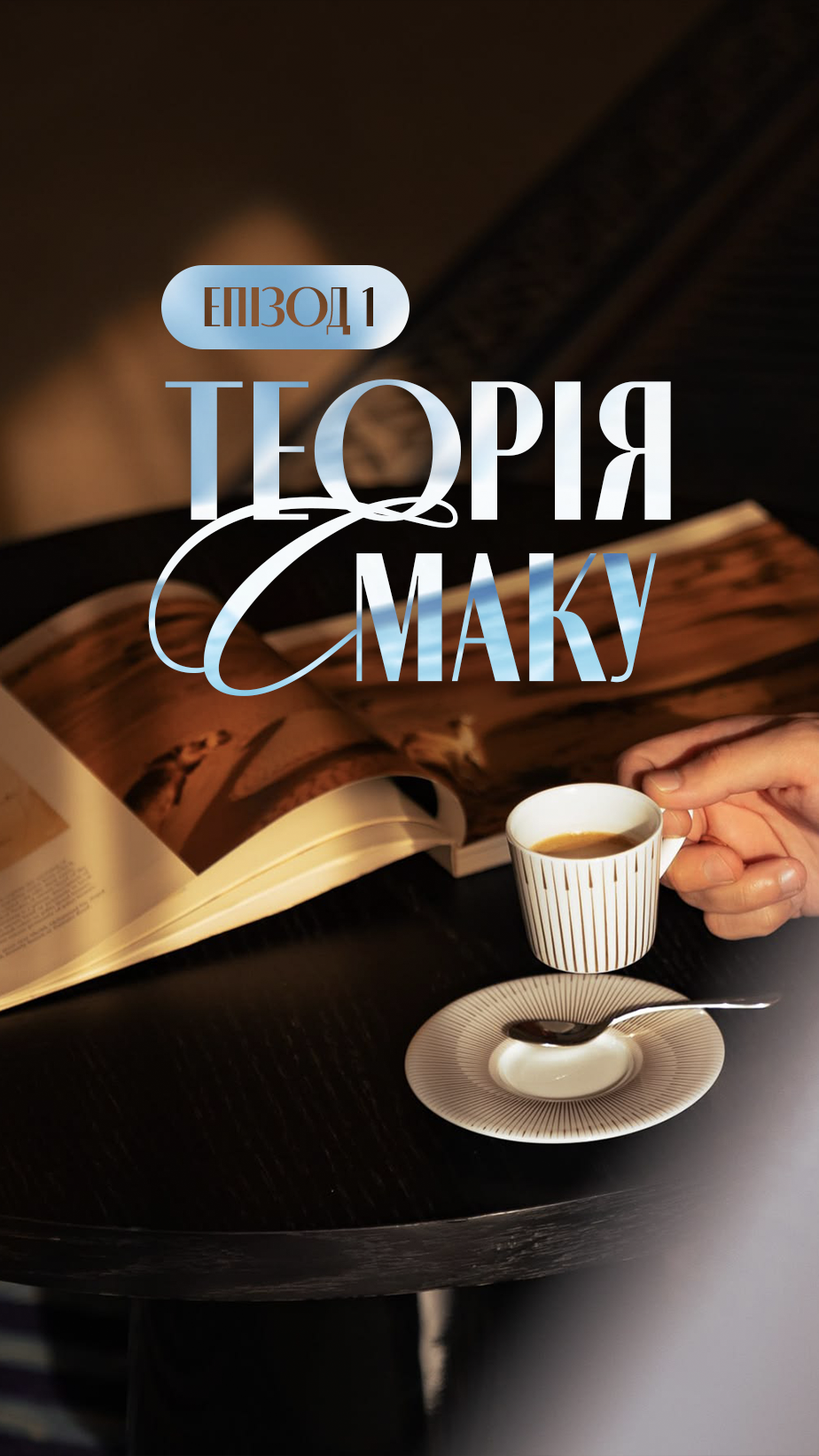
<style>
.page{position:relative;width:819px;height:1456px}
.page>*{position:absolute;margin:0}
.t1{font:55.8px "Moniqa-BlackHeading";color:#7b4d2d}
.t2{font:197.2px/161.3px "Moniqa-BlackHeading"}
.t3{font:382.3px/161.3px "SloopScriptPro-Regular"}
.t4{font:182.6px/161.3px "Moniqa-BlackHeading"}
</style>
<div class="page">
<p class="t1" style="left:204px;top:286px;width:169px;height:49px">ЕПІЗОД 1</p>
<p class="t2" style="left:148px;top:379px;width:523px;height:317px">ТЕОРІЯ<br><span class="t3">С</span><span class="t4">МАКУ</span></p>
</div>
